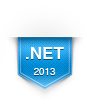
<style>
.page{position:relative;width:87px;height:108px;background:#ffffff}
.page>*{position:absolute;margin:0}
.t1{font:17px "Helvetica-Bold";color:#ffffff}
.t2{font:9.7px "Helvetica";color:#ffffff}
</style>
<div class="page">
<p class="t1" style="left:26px;top:47px;width:38px;height:28px;text-align:center">.NET<br><br><span class="t2">2013</span></p>
</div>
